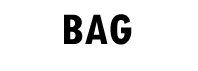
<style>
.page{position:relative;width:198px;height:71px;background:#ffffff}
.page>*{position:absolute;margin:0}
.t1{font:48px "TwCenMT-CondensedBold";color:#000000}
</style>
<div class="page">
<p class="t1" style="left:64px;top:14px;width:68px;height:31px">BAG</p>
</div>
